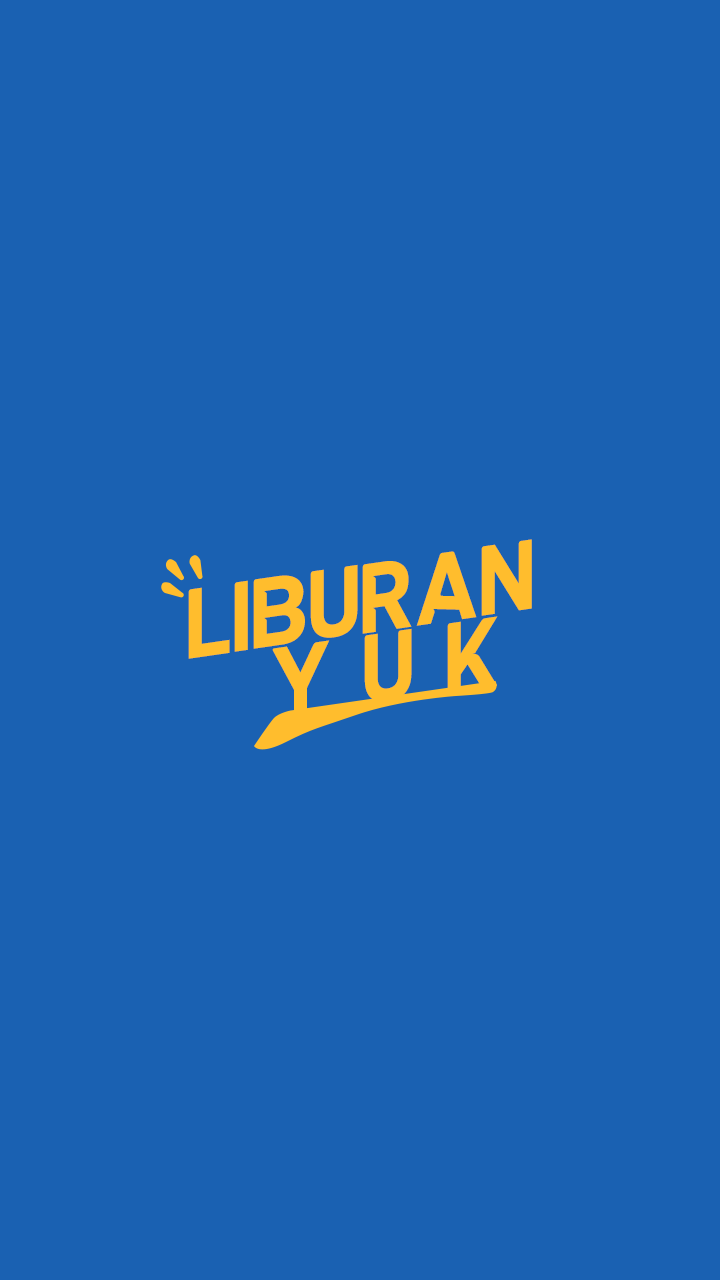
<style>
.page{position:relative;width:720px;height:1280px;background:#1a61b2}
.page>*{position:absolute;margin:0}
.t1{font:47.2px "ALISEORegular";color:#ffbd2d}
</style>
<div class="page">
<p class="t1" style="left:188px;top:539px;width:344px;height:120px;rotate:-8deg">Liburan</p>
<p class="t1" style="left:272px;top:616px;width:226px;height:99px;rotate:-8deg">Y u k</p>
</div>
